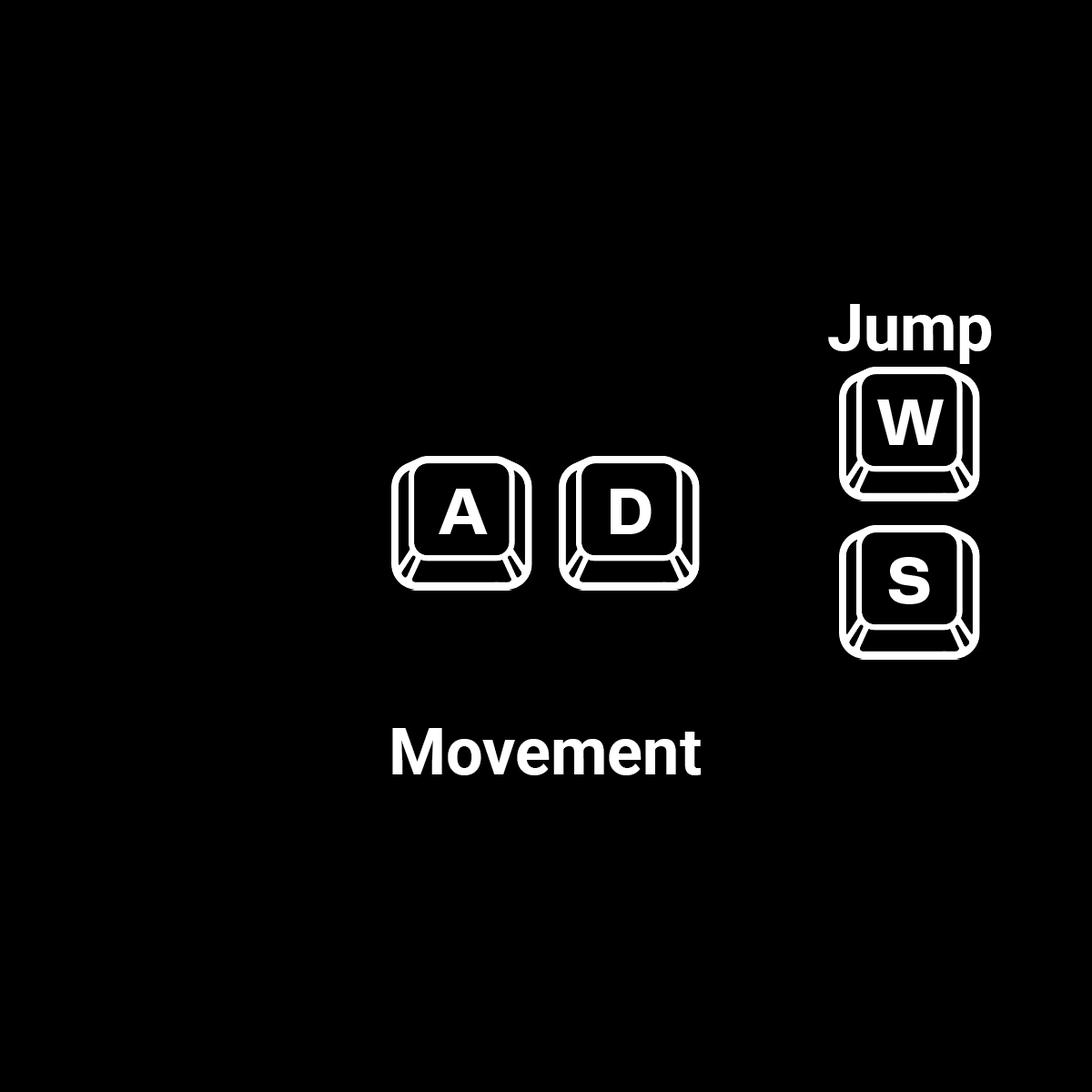
<style>
.page{position:relative;width:1092px;height:1092px;background:#000000}
.page>*{position:absolute;margin:0}
.t1{font:65.5px "Roboto-Bold";color:#ffffff}
</style>
<div class="page">
<p class="t1" style="left:828px;top:304px;width:164px;height:60px">Jump</p>
<p class="t1" style="left:392px;top:728px;width:309px;height:47px">Movement</p>
</div>
